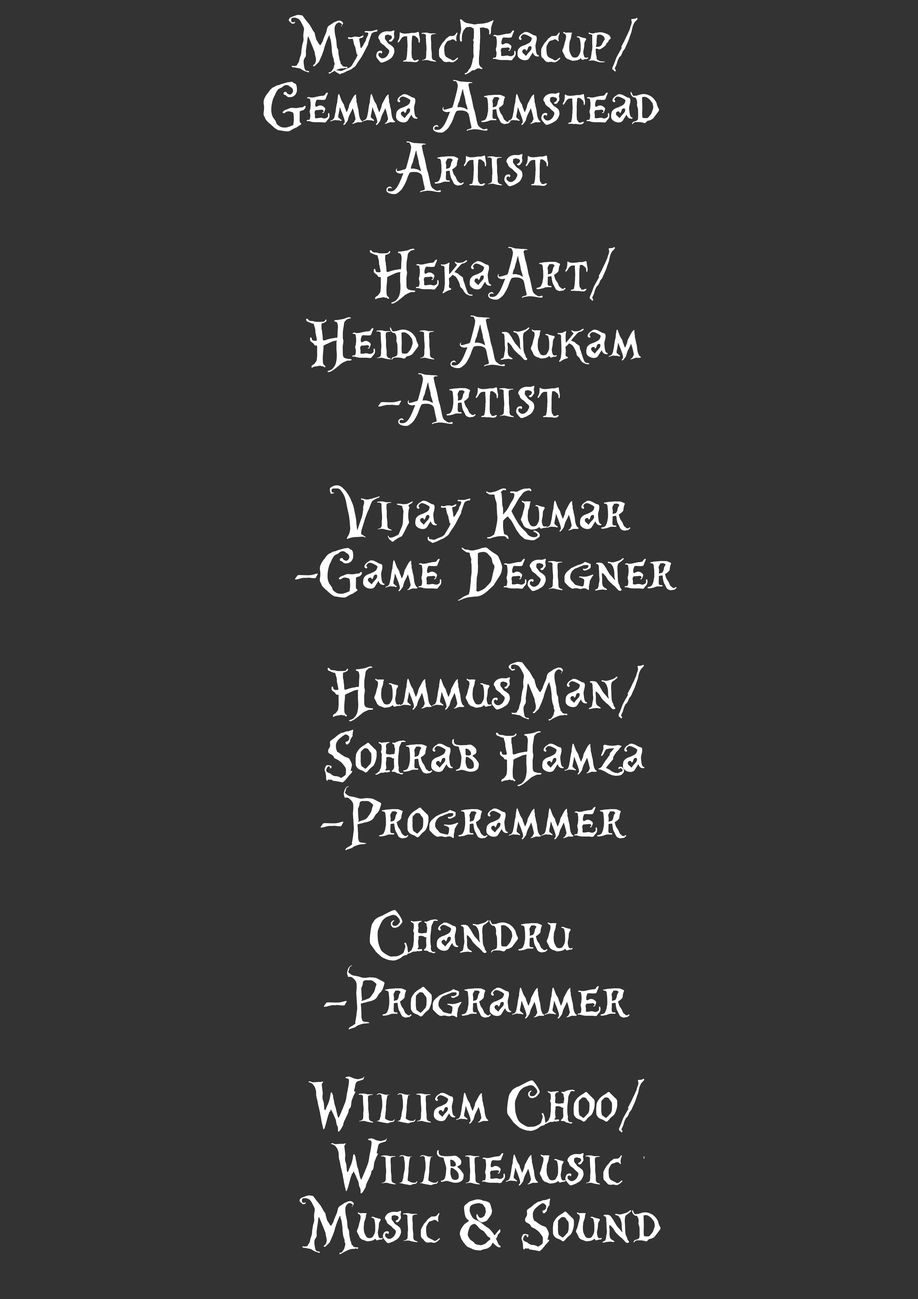
<style>
.page{position:relative;width:918px;height:1299px;background:#333333}
.page>*{position:absolute;margin:0}
.t1{font:74px "AliceinWonderland";color:#ffffff}
.t2{font:4.4px "AliceinWonderland";color:#ffffff}
</style>
<div class="page">
<p class="t1" style="left:289px;top:15px;width:349px;height:59px">MysticTeacup/</p>
<p class="t1" style="left:264px;top:80px;width:395px;height:53px">Gemma Armstead</p>
<p class="t1" style="left:386px;top:141px;width:162px;height:53px">Artist</p>
<p class="t1" style="left:370px;top:247px;width:245px;height:57px">HekaArt/</p>
<p class="t1" style="left:306px;top:315px;width:335px;height:57px">Heidi Anukam</p>
<p class="t1" style="left:378px;top:373px;width:182px;height:53px">-Artist</p>
<p class="t1" style="left:330px;top:485px;width:300px;height:58px">Vijay Kumar</p>
<p class="t1" style="left:295px;top:547px;width:382px;height:53px">-Game Designer</p>
<p class="t1" style="left:328px;top:662px;width:316px;height:59px">HummusMan/</p>
<p class="t1" style="left:324px;top:729px;width:321px;height:57px">Sohrab Hamza</p>
<p class="t1" style="left:321px;top:786px;width:305px;height:64px">-Programmer</p>
<p class="t1" style="left:308px;top:1076px;width:337px;height:56px">William Choo/</p>
<p class="t1" style="left:331px;top:1138px;width:292px;height:55px">Willbiemusic</p>
<p class="t2" style="left:643px;top:1156px;width:2px;height:2px">t</p>
<p class="t1" style="left:300px;top:1195px;width:361px;height:59px">Music &amp; Sound</p>
</div>
